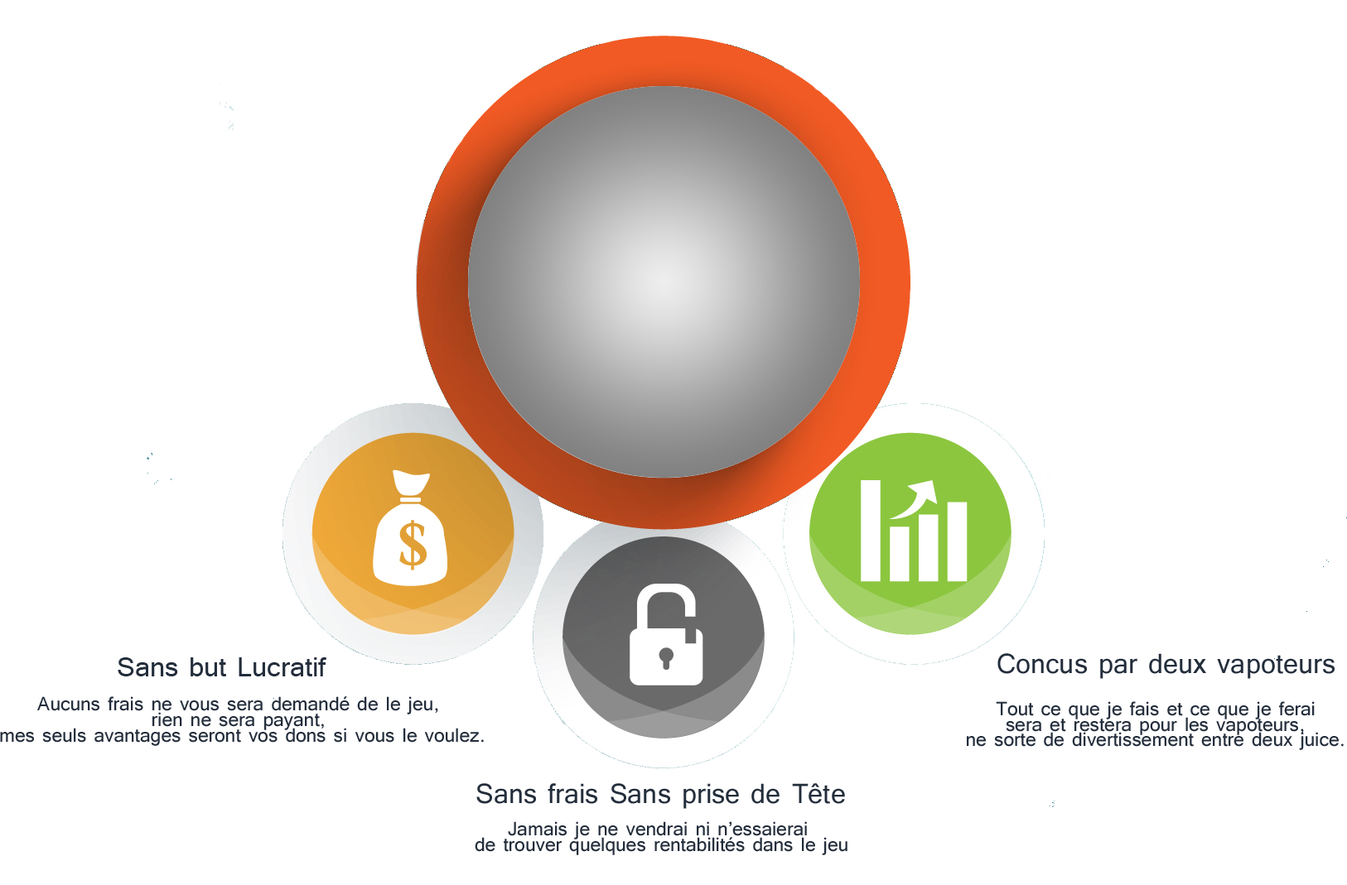
<style>
.page{position:relative;width:1347px;height:885px;background:#ffffff}
.page>*{position:absolute;margin:0}
.t1{font:34.5px "Tunga";color:#232d3b}
.t2{font:24.2px/15.5px "Tunga";color:#232d3b}
</style>
<div class="page">
<p class="t1" style="left:997px;top:653px;width:337px;height:26px">Concus par deux vapoteurs</p>
<p class="t1" style="left:118px;top:658px;width:208px;height:19px">Sans but Lucratif</p>
<p class="t2" style="left:0px;top:697px;width:484px;height:49px;text-align:center">Aucuns frais ne vous sera demandé de le jeu, <br>rien ne sera payant, <br>mes seuls avantages seront vos dons si vous le voulez.</p>
<p class="t2" style="left:967px;top:702px;width:376px;height:48px;text-align:center">Tout ce que je fais et ce que je ferai<br> sera et restera pour les vapoteurs, <br>ne sorte de divertissement entre deux juice.</p>
<p class="t1" style="left:476px;top:784px;width:369px;height:25px">Sans frais Sans prise de Tête</p>
<p class="t2" style="left:475px;top:822px;width:372px;height:34px;text-align:center">Jamais je ne vendrai ni n’essaierai<br> de trouver quelques rentabilités dans le jeu</p>
</div>
